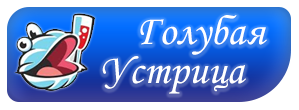
<style>
.page{position:relative;width:299px;height:110px;background:#ffffff}
.page>*{position:absolute;margin:0}
.t1{font:42px/39px "MonotypeCorsiva";color:#ffffff}
</style>
<div class="page">
<p class="t1" style="left:102px;top:15px;width:165px;height:79px">Голубая<br>Устрица</p>
</div>
